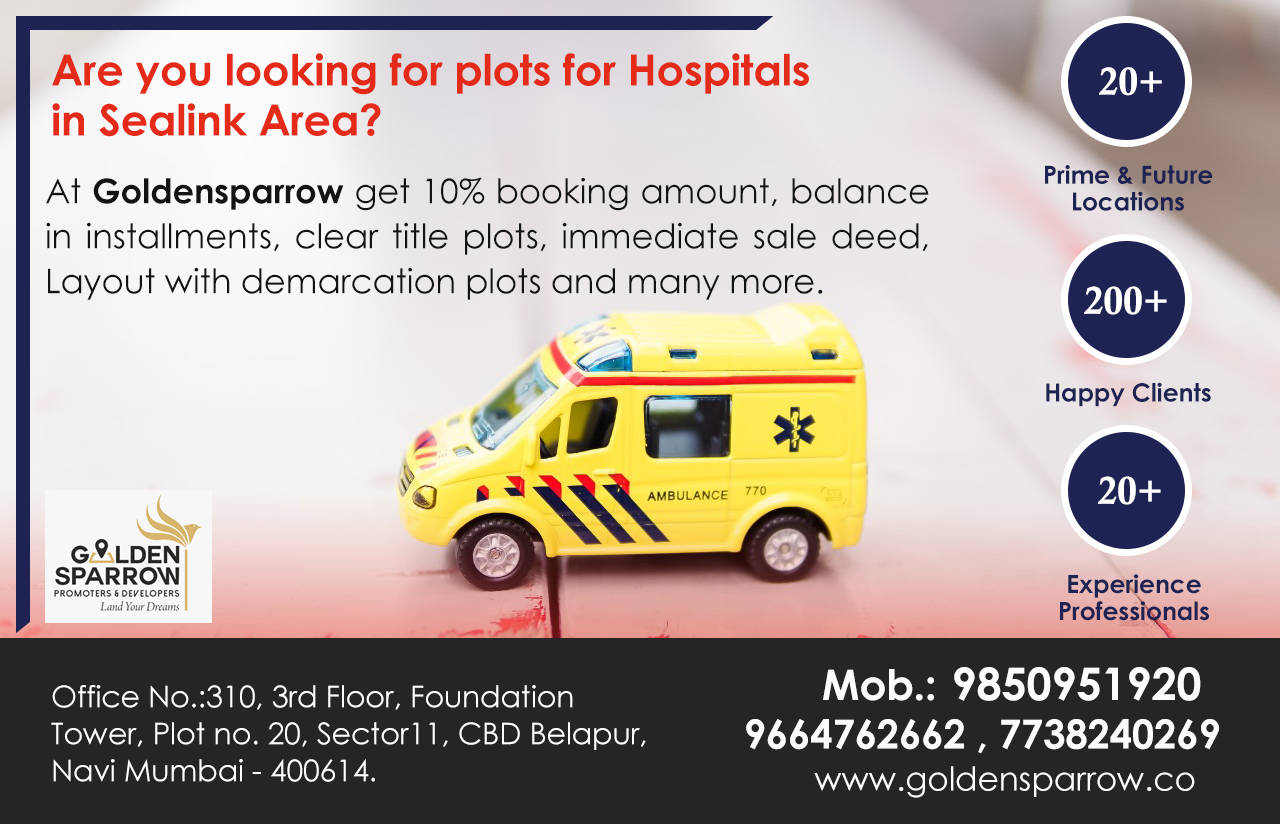
<style>
.page{position:relative;width:1280px;height:824px;background:#252525}
.page>*{position:absolute;margin:0}
.t1{font:43px/50px "CenturyGothic-Bold";letter-spacing:-0.005em;color:#e42b1a}
.t2{font:38.7px "CalisMTBol";letter-spacing:-0.005em;color:#ffffff}
.t3{font:25px/27px "CenturyGothic-Bold";letter-spacing:-0.005em;color:#1f2353}
.t4{font:34px/45px "CenturyGothic";letter-spacing:-0.005em;color:#131313}
.t5{font:34px/45px "CenturyGothic-Bold";letter-spacing:-0.005em;color:#131313}
.t6{font:38.8px "CalisMTBol";letter-spacing:-0.005em;color:#ffffff}
.t7{font:25px "CenturyGothic-Bold";letter-spacing:-0.005em;color:#1f2353}
.t8{font:25.1px/27px "CenturyGothic-Bold";letter-spacing:-0.005em;color:#1f2353}
.t9{font:45px "CenturyGothic-Bold";letter-spacing:-0.005em;color:#fcfcfc}
.t10{font:42px "CenturyGothic-Bold";letter-spacing:-0.005em;color:#fcfcfc}
.t11{font:30px/37px "CenturyGothic";letter-spacing:-0.005em;color:#fefefe}
.t12{font:40px "CenturyGothic-Bold";letter-spacing:-0.005em;color:#fcfcfc}
.t13{font:33px "CenturyGothic";letter-spacing:-0.005em;color:#fcfcfc}
</style>
<div class="page">
<p class="t1" style="left:52px;top:53px;width:757px;height:84px">Are you looking for plots for Hospitals in Sealink Area?</p>
<p class="t2" style="left:1099px;top:67px;width:63px;height:29px">20+</p>
<p class="t3" style="left:1045px;top:165px;width:168px;height:46px;text-align:center">Prime &amp; Future Locations</p>
<p class="t4" style="left:46px;top:177px;width:883px;height:123px;text-align:justify">At <span class="t5">Goldensparrow</span> get 10% booking amount, balance in installments, clear title plots, immediate sale deed, Layout with demarcation plots and many more.</p>
<p class="t6" style="left:1084px;top:286px;width:83px;height:29px">200+</p>
<p class="t7" style="left:1046px;top:382px;width:165px;height:25px">Happy Clients</p>
<p class="t6" style="left:1098px;top:476px;width:63px;height:29px">20+</p>
<p class="t8" style="left:1060px;top:574px;width:149px;height:47px;text-align:center">Experience Professionals</p>
<p class="t9" style="left:823px;top:667px;width:378px;height:34px"><span class="t10">Mob.: </span>9850951920</p>
<p class="t11" style="left:51px;top:685px;width:595px;height:97px">Office No.:310, 3rd Floor, Foundation Tower, Plot no. 20, Sector11, CBD Belapur, Navi Mumbai - 400614.</p>
<p class="t12" style="left:746px;top:719px;width:473px;height:35px">9664762662 , 7738240269</p>
<p class="t13" style="left:814px;top:766px;width:381px;height:32px">www.goldensparrow.co</p>
</div>
